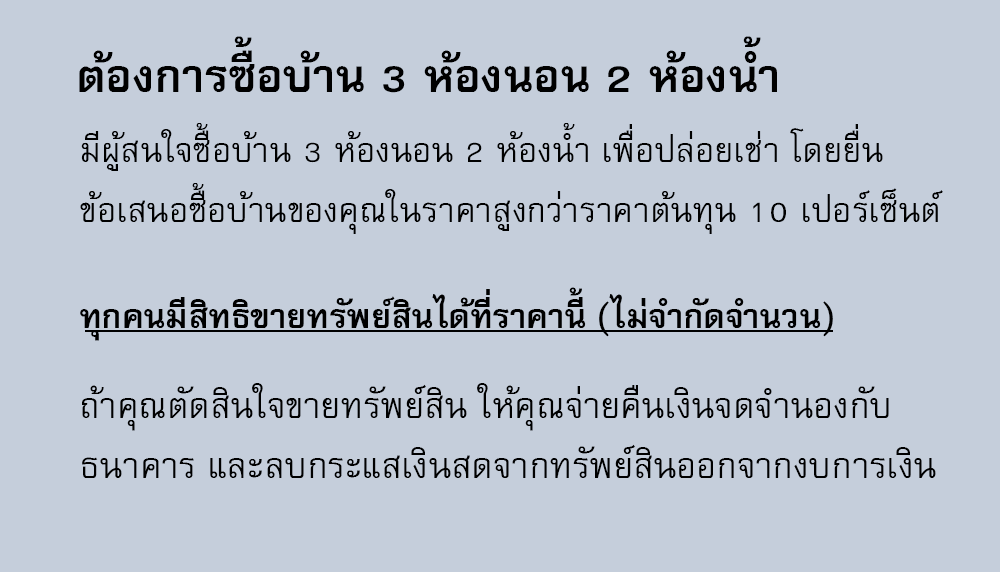
<style>
.page{position:relative;width:1000px;height:572px;background:#c5cedb}
.page>*{position:absolute;margin:0}
.t1{font:64px "FreesiaUPCBold";color:#000000}
.t2{font:48px/60px "FreesiaUPC";color:#000000}
.t3{font:47px "FreesiaUPCBold";color:#000000}
.t4{font:50px/60px "FreesiaUPC";color:#000000}
</style>
<div class="page">
<p class="t1" style="left:79px;top:36px;width:698px;height:57px">ต้องการซื้อบ้าน 3 ห้องนอน 2 ห้องน้ำ</p>
<p class="t2" style="left:80px;top:123px;width:863px;height:111px">มีผู้สนใจซื้อบ้าน 3 ห้องนอน 2 ห้องน้ำ เพื่อปล่อยเช่า โดยยื่น<br>ข้อเสนอซื้อบ้านของคุณในราคาสูงกว่าราคาต้นทุน 10 เปอร์เซ็นต์</p>
<p class="t3" style="left:80px;top:287px;width:753px;height:54px">ทุกคนมีสิทธิขายทรัพย์สินได้ที่ราคานี้ (ไม่จำกัดจำนวน)</p>
<p class="t4" style="left:82px;top:383px;width:854px;height:95px">ถ้าคุณตัดสินใจขายทรัพย์สิน ให้คุณจ่ายคืนเงินจดจำนองกับ<br>ธนาคาร และลบกระแสเงินสดจากทรัพย์สินออกจากงบการเงิน</p>
</div>
